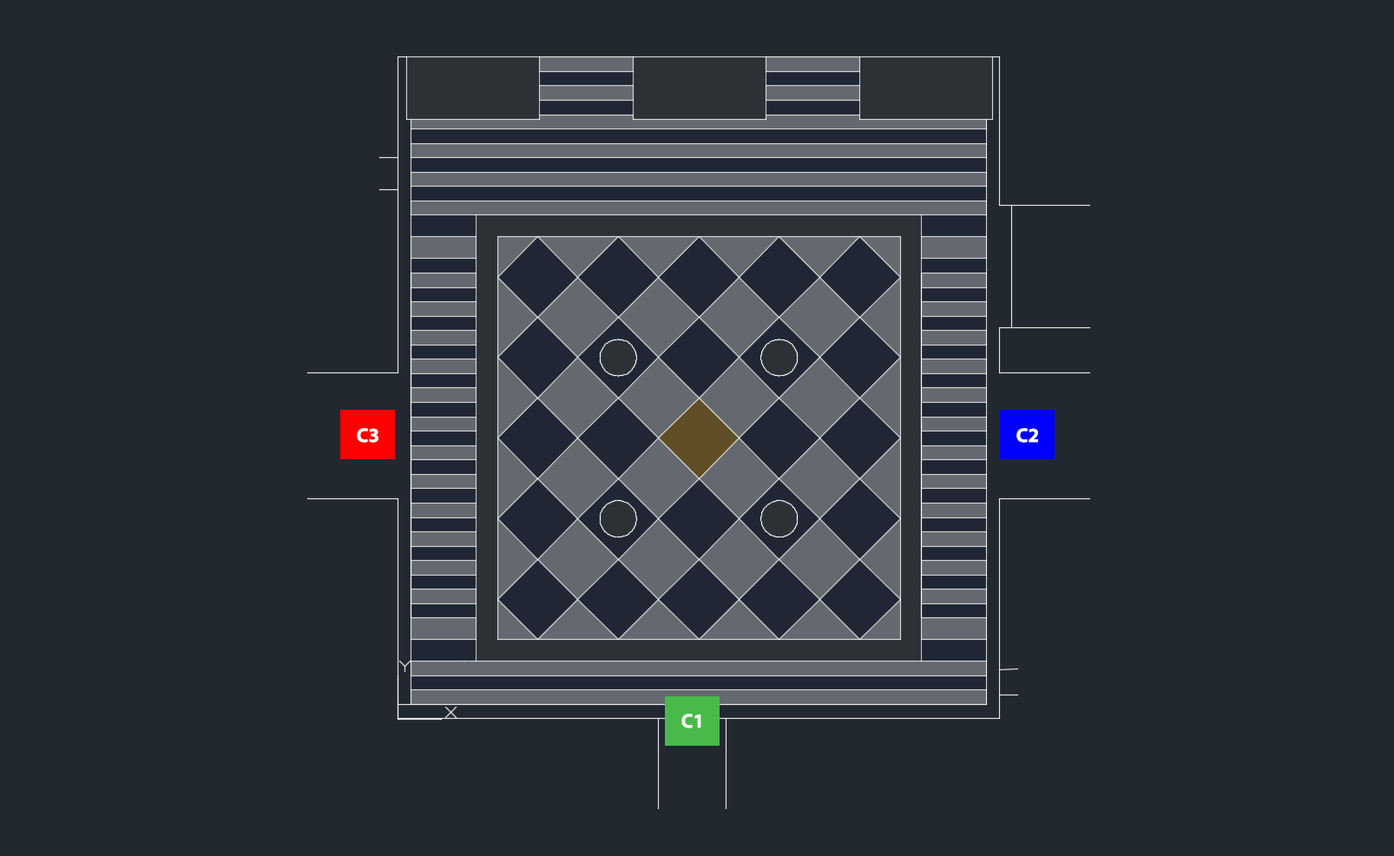
<style>
.page{position:relative;width:1394px;height:856px;background:#212830}
.page>*{position:absolute;margin:0}
.t1{font:20px "MyriadPro-Bold";color:#ffffff}
</style>
<div class="page">
<p class="t1" style="left:357px;top:428px;width:21px;height:15px">C3</p>
<p class="t1" style="left:1016px;top:428px;width:22px;height:15px">C2</p>
<p class="t1" style="left:681px;top:713px;width:20px;height:15px">C1</p>
</div>
